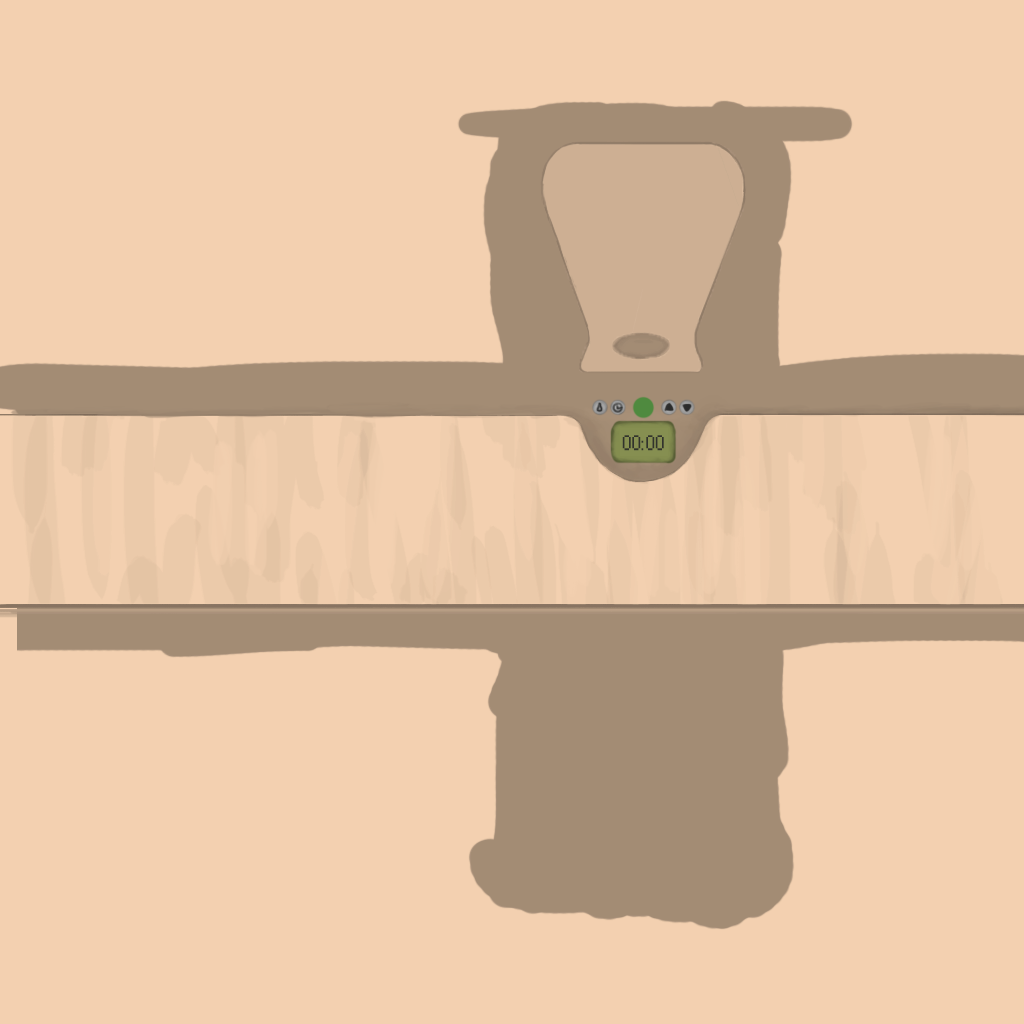
<style>
.page{position:relative;width:1024px;height:1024px;background:#f3d0b0}
.page>*{position:absolute;margin:0}
.t1{font:20px "Small Fonts";color:#32332d}
</style>
<div class="page">
<p class="t1" style="left:622px;top:435px;width:42px;height:16px">00:00</p>
</div>
